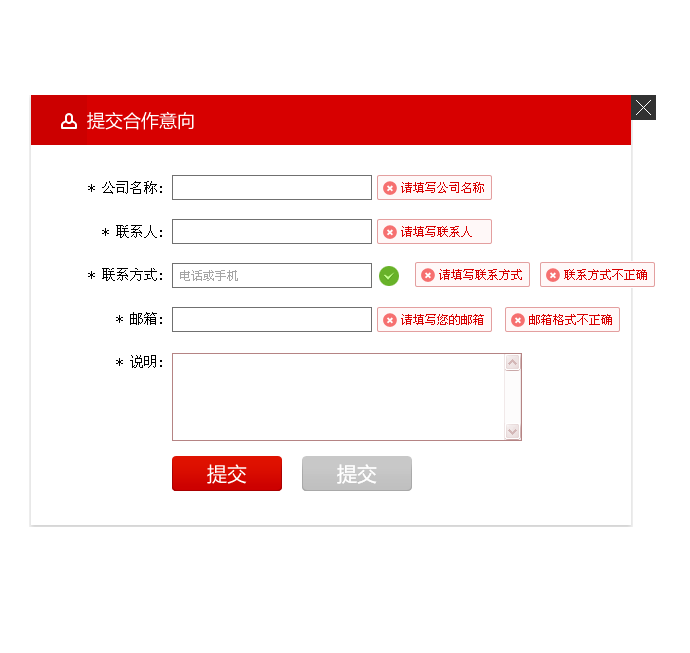
<style>
.page{position:relative;width:690px;height:653px;background:#ffffff}
.page>*{position:absolute;margin:0}
.t1{font:18px "MicrosoftYaHei";color:#ffffff}
.t2{font:14px "SimSun";color:#000000}
.t3{font:12px "SimSun";color:#d70000}
.t4{font:12px "SimSun";color:#a5a5a5}
</style>
<div class="page">
<p class="t1" style="left:87px;top:111px;width:107px;height:19px">提交合作意向</p>
<p class="t2" style="left:88px;top:181px;width:74px;height:13px">* 公司名称:</p>
<p class="t3" style="left:401px;top:182px;width:83px;height:11px">请填写公司名称</p>
<p class="t2" style="left:102px;top:225px;width:60px;height:13px">* 联系人:</p>
<p class="t3" style="left:401px;top:226px;width:71px;height:11px">请填写联系人</p>
<p class="t2" style="left:88px;top:268px;width:74px;height:13px">* 联系方式:</p>
<p class="t4" style="left:180px;top:270px;width:58px;height:11px">电话或手机</p>
<p class="t3" style="left:439px;top:269px;width:83px;height:11px">请填写联系方式</p>
<p class="t3" style="left:564px;top:269px;width:83px;height:11px">联系方式不正确</p>
<p class="t2" style="left:116px;top:312px;width:46px;height:13px">* 邮箱:</p>
<p class="t3" style="left:401px;top:314px;width:83px;height:11px">请填写您的邮箱</p>
<p class="t3" style="left:529px;top:314px;width:83px;height:11px">邮箱格式不正确</p>
<p class="t2" style="left:116px;top:355px;width:46px;height:13px">* 说明:</p>
</div>
